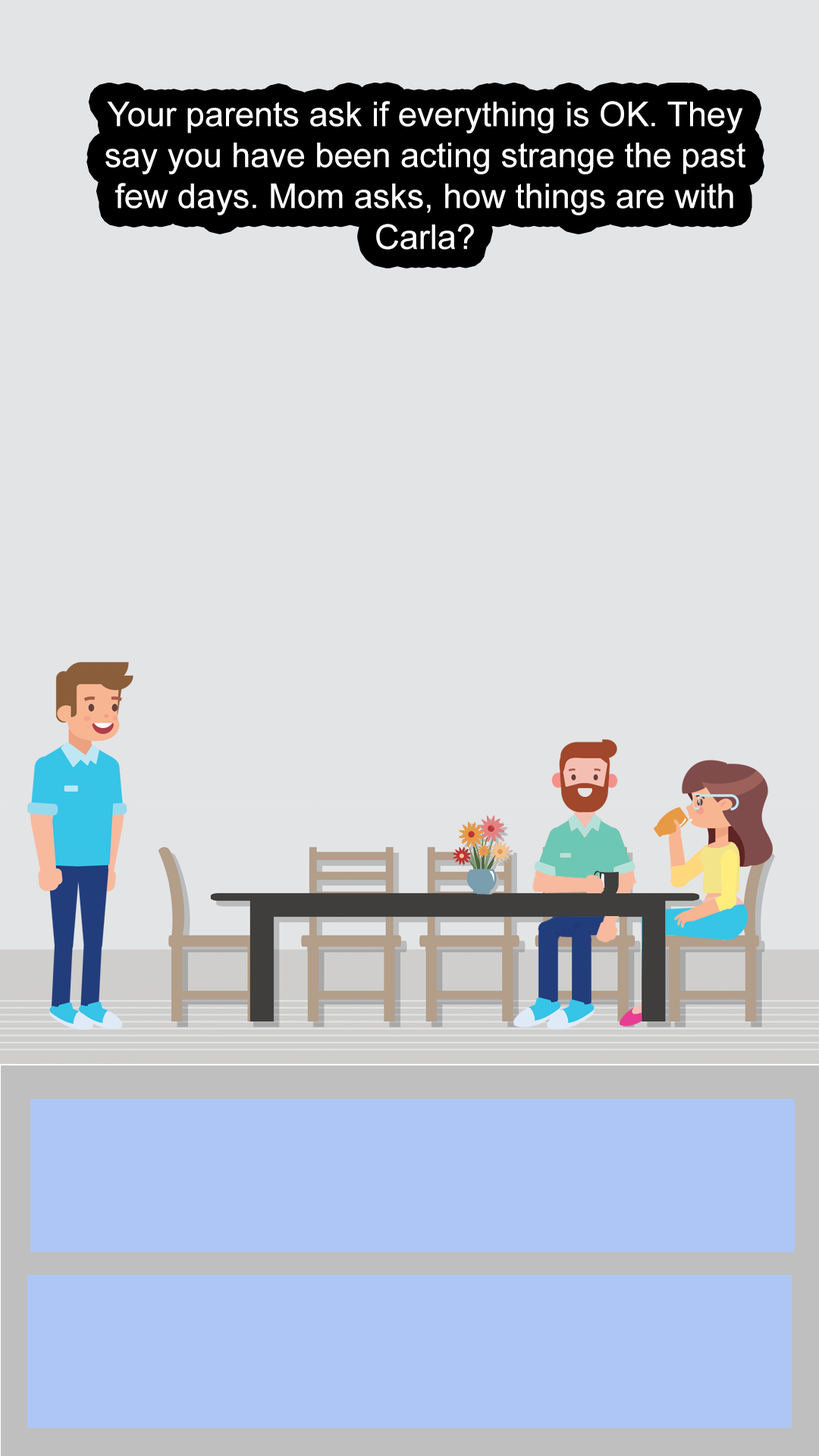
<style>
.page{position:relative;width:819px;height:1456px;background:#e3e4e5}
.page>*{position:absolute;margin:0}
.t1{font:34.1px "ArialMT";color:#ffffff}
</style>
<div class="page">
<p class="t1" style="left:105px;top:101px;width:640px;height:148px;text-align:center">Your parents ask if everything is OK. They say you have been acting strange the past few days. Mom asks, how things are with Carla?</p>
</div>
